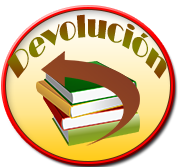
<style>
.page{position:relative;width:178px;height:167px;background:#ffffff}
.page>*{position:absolute;margin:0}
.t1{font:33.3px "Broadway";scale:0.69 1}
</style>
<div class="page">
<p class="t1" style="left:7px;top:14px;width:160px;height:65px">Devolución</p>
</div>
